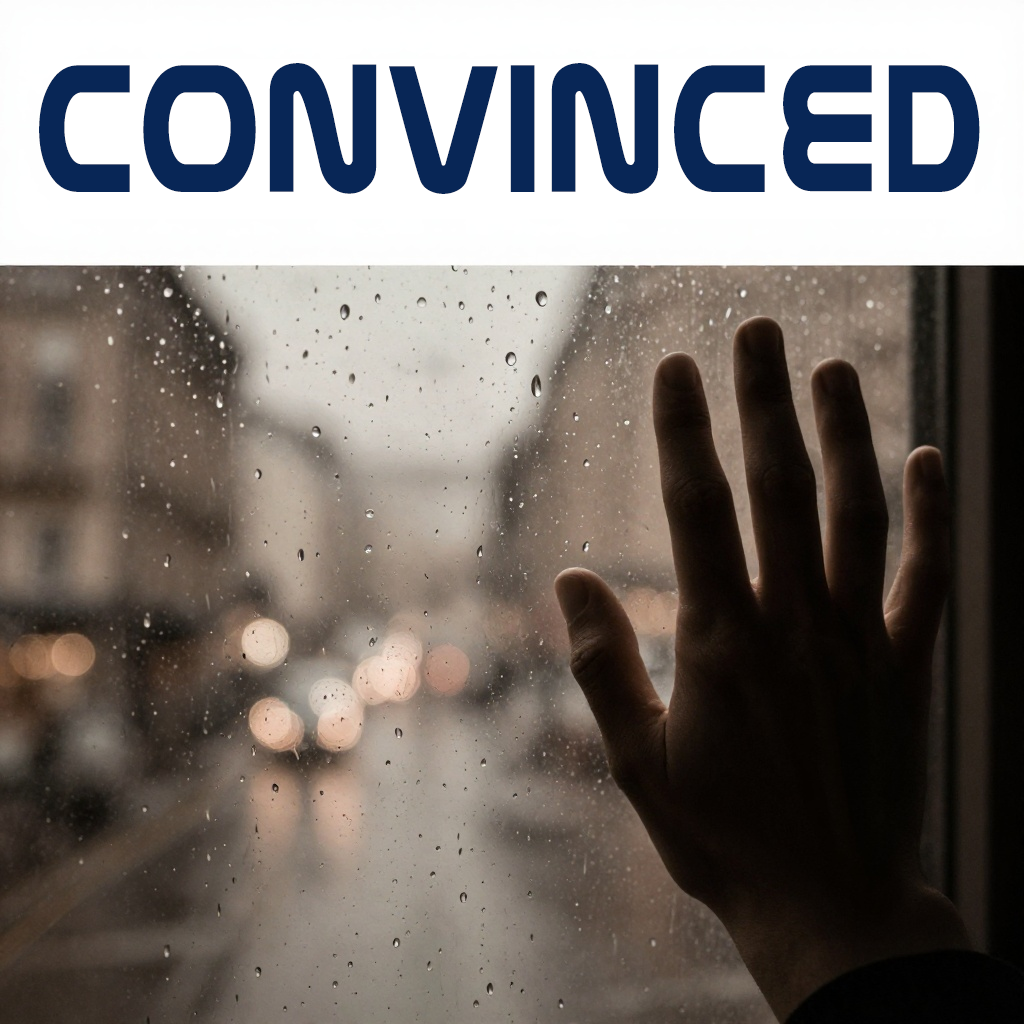
<style>
.page{position:relative;width:1024px;height:1024px}
.page>*{position:absolute;margin:0}
.t1{font:190.2px "Nasalization";letter-spacing:0.025em;color:#082656;font-weight:bold;scale:0.83 1}
</style>
<div class="page">
<p class="t1" style="left:39px;top:63px;width:941px;height:131px">CONVINCED</p>
</div>
